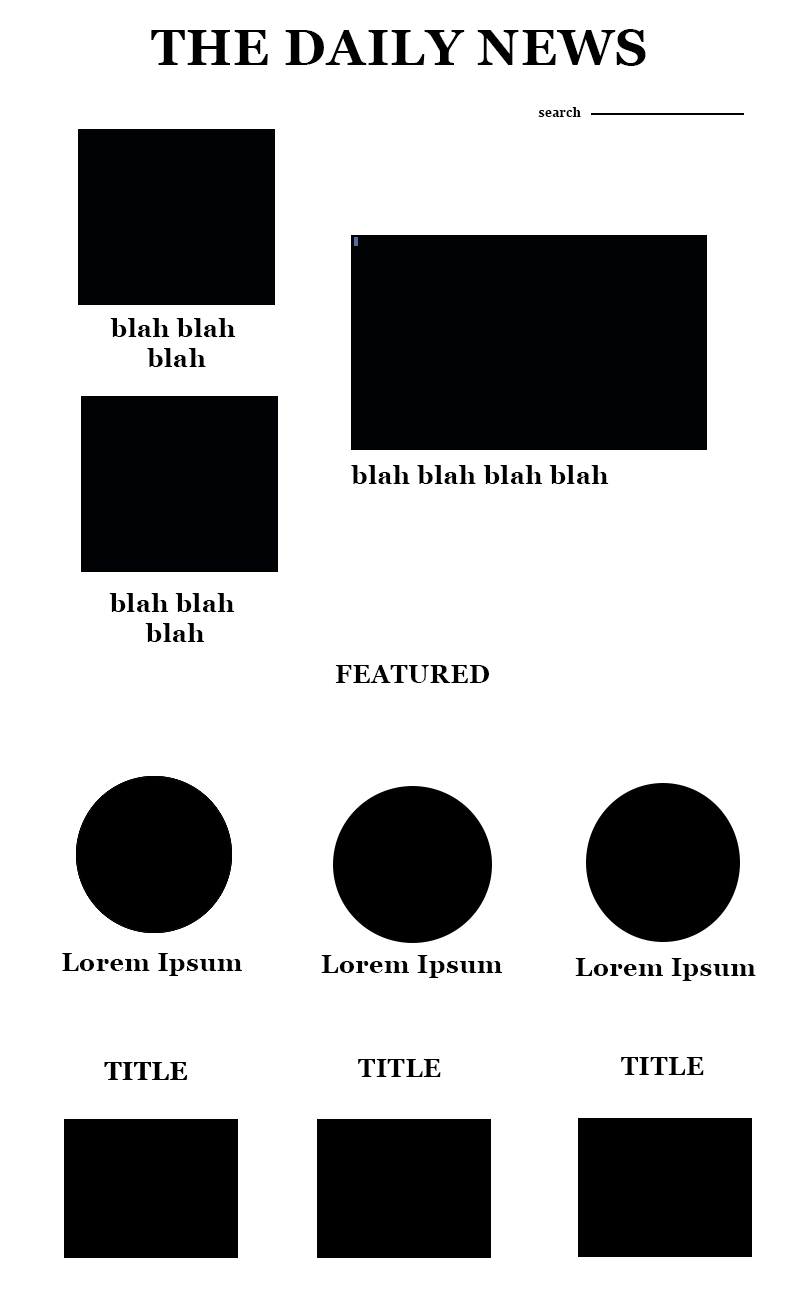
<style>
.page{position:relative;width:800px;height:1300px;background:#ffffff}
.page>*{position:absolute;margin:0}
.t1{font:50px "Georgia-Bold";letter-spacing:0.025em;color:#000000}
.t2{font:12px "Georgia-Bold";letter-spacing:0.025em;color:#000000}
.t3{font:25px "Georgia-Bold";letter-spacing:0.025em;color:#000000}
</style>
<div class="page">
<p class="t1" style="left:151px;top:29px;width:495px;height:37px">THE DAILY NEWS</p>
<p class="t2" style="left:538px;top:107px;width:43px;height:10px">search</p>
<p class="t3" style="left:110px;top:318px;width:126px;height:49px;text-align:center">blah blah <br>blah</p>
<p class="t3" style="left:351px;top:465px;width:258px;height:19px">blah blah blah blah</p>
<p class="t3" style="left:109px;top:593px;width:126px;height:49px;text-align:center">blah blah <br>blah</p>
<p class="t3" style="left:335px;top:665px;width:154px;height:18px">FEATURED</p>
<p class="t3" style="left:62px;top:953px;width:180px;height:23px">Lorem Ipsum</p>
<p class="t3" style="left:321px;top:955px;width:181px;height:23px">Lorem Ipsum</p>
<p class="t3" style="left:575px;top:958px;width:181px;height:23px">Lorem Ipsum</p>
<p class="t3" style="left:104px;top:1062px;width:83px;height:18px">TITLE</p>
<p class="t3" style="left:104px;top:1062px;width:83px;height:18px">TITLE</p>
<p class="t3" style="left:358px;top:1059px;width:83px;height:18px">TITLE</p>
<p class="t3" style="left:621px;top:1057px;width:83px;height:18px">TITLE</p>
</div>
